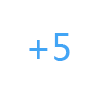
<style>
.page{position:relative;width:100px;height:100px;background:#ffffff}
.page>*{position:absolute;margin:0}
.t1{font:36px "MicrosoftYaHei";color:#42a5f5}
</style>
<div class="page">
<p class="t1" style="left:29px;top:33px;width:41px;height:28px">+5</p>
</div>
